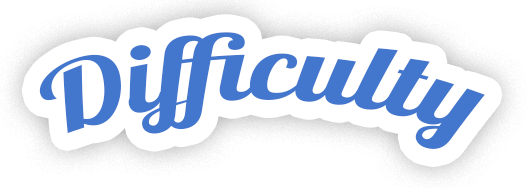
<style>
.page{position:relative;width:532px;height:188px;background:#ffffff}
.page>*{position:absolute;margin:0}
.t1{font:87.1px "Lobster1.4";color:#4377cd;scale:0.86 1}
</style>
<div class="page">
<p class="t1" style="left:39px;top:32px;width:446px;height:117px">Difficulty</p>
</div>
